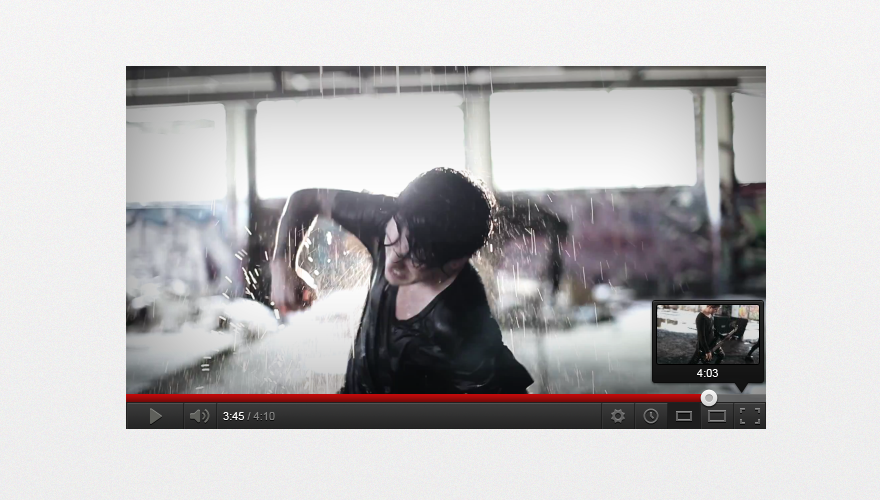
<style>
.page{position:relative;width:880px;height:500px}
.page>*{position:absolute;margin:0}
.t1{font:11px "ArialMT";color:#fffffe}
.t2{font:11px "ArialMT";color:#838382}
</style>
<div class="page">
<p class="t1" style="left:697px;top:369px;width:21px;height:8px">4:03</p>
<p class="t2" style="left:223px;top:412px;width:52px;height:8px"><span class="t1">3:45 </span>/ 4:10</p>
</div>
